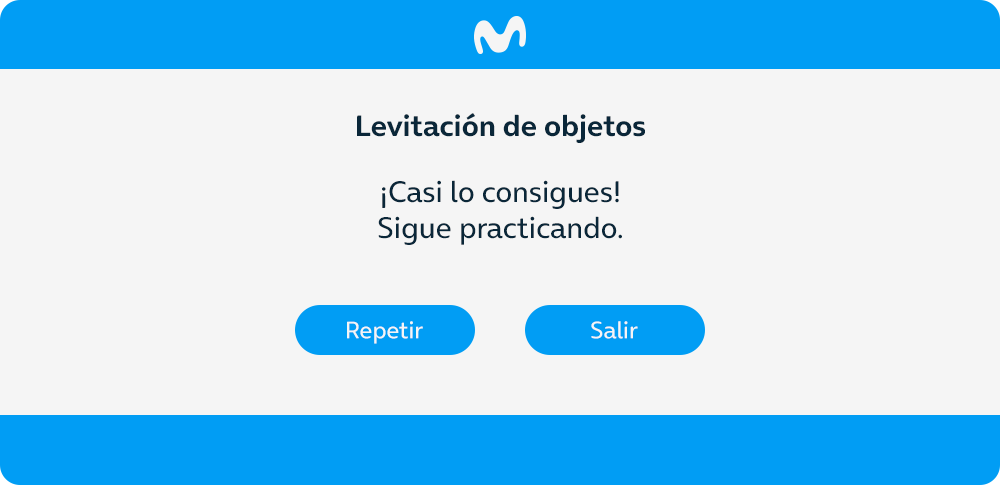
<style>
.page{position:relative;width:1000px;height:485px;background:#f5f5f5}
.page>*{position:absolute;margin:0}
.t1{font:30px "OnAir-Bold";color:#0a2739}
.t2{font:30px "OnAir-Regular";color:#0a2739}
.t3{font:24px "OnAir-Regular";color:#f5f5f5}
</style>
<div class="page">
<p class="t1" style="left:357px;top:113px;width:288px;height:30px">Levitación de objetos</p>
<p class="t2" style="left:378px;top:180px;width:244px;height:65px;text-align:center">¡Casi lo consigues!<br>Sigue practicando.</p>
<p class="t3" style="left:347px;top:321px;width:76px;height:23px">Repetir</p>
<p class="t3" style="left:591px;top:321px;width:47px;height:18px">Salir</p>
</div>
